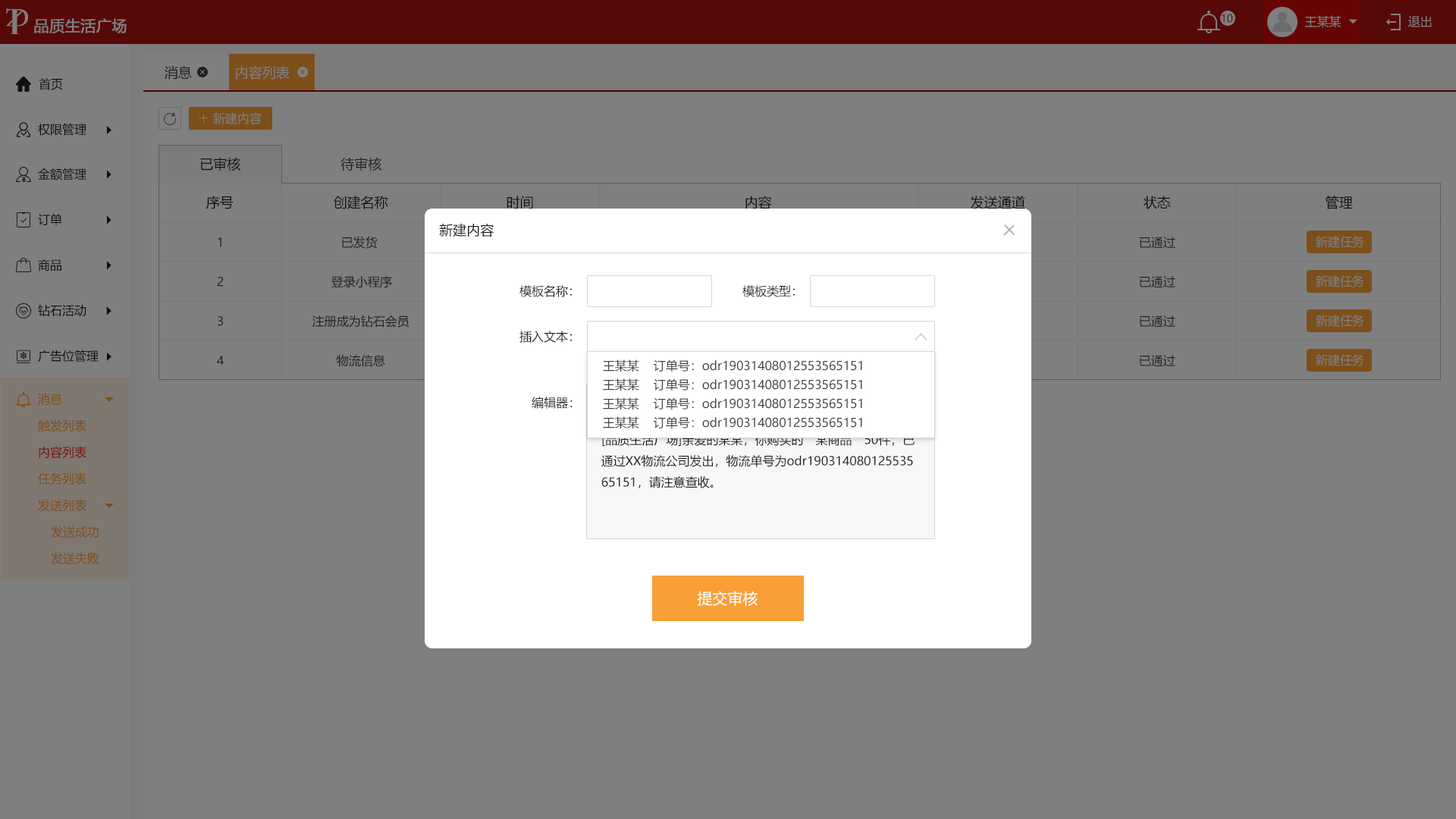
<style>
.page{position:relative;width:1456px;height:819px;background:#7f7f7f}
.page>*{position:absolute;margin:0}
.t1{font:10.6px "MicrosoftYaHei";color:#4e0303;text-transform:uppercase}
.t2{font:12.1px "MicrosoftYaHei";color:#7f7f7f;text-transform:uppercase}
.t3{font:15.2px "MicrosoftYaHei";color:#7f7f7f;text-transform:uppercase;font-weight:bold}
.t4{font:13.6px "MicrosoftYaHei";color:#202020;text-transform:uppercase}
.t5{font:13.6px "MicrosoftYaHei";color:#7f7f7f;text-transform:uppercase}
.t6{font:12.1px "MicrosoftYaHei";color:#202020;text-transform:uppercase}
.t7{font:12.1px "MicrosoftYaHei";color:#404040}
.t8{font:12.1px "MicrosoftYaHei";color:#7c4f1b;text-transform:uppercase}
.t9{font:12.1px "MicrosoftYaHei";color:#202020}
.t10{font:12.1px "MicrosoftYaHei";color:#730f0c;text-transform:uppercase}
.t11{font:15.2px "MicrosoftYaHei";color:#ffffff}
</style>
<div class="page">
<p class="t1" style="left:1222px;top:14px;width:11px;height:9px">10</p>
<p class="t2" style="left:1305px;top:15px;width:36px;height:13px">王某某</p>
<p class="t2" style="left:1408px;top:16px;width:24px;height:11px">退出</p>
<p class="t3" style="left:34px;top:18px;width:93px;height:15px">品质生活广场</p>
<p class="t4" style="left:165px;top:66px;width:27px;height:14px">消息</p>
<p class="t5" style="left:236px;top:66px;width:54px;height:14px">内容列表</p>
<p class="t6" style="left:39px;top:78px;width:24px;height:12px">首页</p>
<p class="t2" style="left:213px;top:112px;width:49px;height:12px">新建内容</p>
<p class="t6" style="left:38px;top:123px;width:48px;height:13px">权限管理</p>
<p class="t4" style="left:200px;top:157px;width:41px;height:14px">已审核</p>
<p class="t4" style="left:340px;top:157px;width:42px;height:14px">待审核</p>
<p class="t6" style="left:38px;top:168px;width:48px;height:12px">金额管理</p>
<p class="t4" style="left:206px;top:196px;width:28px;height:13px">序号</p>
<p class="t4" style="left:334px;top:196px;width:54px;height:13px">创建名称</p>
<p class="t4" style="left:507px;top:196px;width:26px;height:13px">时间</p>
<p class="t4" style="left:745px;top:196px;width:27px;height:13px">内容</p>
<p class="t4" style="left:971px;top:196px;width:54px;height:13px">发送通道</p>
<p class="t4" style="left:1143px;top:196px;width:28px;height:13px">状态</p>
<p class="t4" style="left:1326px;top:196px;width:27px;height:13px">管理</p>
<p class="t6" style="left:38px;top:213px;width:24px;height:13px">订单</p>
<p class="t4" style="left:439px;top:223px;width:55px;height:14px">新建内容</p>
<p class="t6" style="left:218px;top:237px;width:3px;height:10px">1</p>
<p class="t6" style="left:342px;top:236px;width:36px;height:13px">已发货</p>
<p class="t6" style="left:1140px;top:237px;width:35px;height:12px">已通过</p>
<p class="t2" style="left:1316px;top:236px;width:48px;height:12px">新建任务</p>
<p class="t6" style="left:38px;top:259px;width:23px;height:12px">商品</p>
<p class="t6" style="left:217px;top:277px;width:7px;height:10px">2</p>
<p class="t6" style="left:331px;top:275px;width:61px;height:13px">登录小程序</p>
<p class="t6" style="left:1140px;top:276px;width:35px;height:12px">已通过</p>
<p class="t2" style="left:1316px;top:275px;width:48px;height:12px">新建任务</p>
<p class="t6" style="left:519px;top:285px;width:53px;height:12px">模板名称：</p>
<p class="t6" style="left:742px;top:285px;width:53px;height:12px">模板类型：</p>
<p class="t6" style="left:38px;top:304px;width:48px;height:12px">钻石活动</p>
<p class="t6" style="left:218px;top:316px;width:5px;height:10px">3</p>
<p class="t6" style="left:312px;top:315px;width:97px;height:13px">注册成为钻石会员</p>
<p class="t6" style="left:1140px;top:315px;width:35px;height:13px">已通过</p>
<p class="t2" style="left:1316px;top:315px;width:48px;height:12px">新建任务</p>
<p class="t6" style="left:519px;top:331px;width:53px;height:12px">插入文本：</p>
<p class="t6" style="left:38px;top:350px;width:61px;height:12px">广告位管理</p>
<p class="t6" style="left:217px;top:356px;width:7px;height:10px">4</p>
<p class="t6" style="left:336px;top:354px;width:49px;height:13px">物流信息</p>
<p class="t7" style="left:603px;top:359px;width:259px;height:13px">王某某    订单号：odr19031408012553565151</p>
<p class="t6" style="left:1140px;top:355px;width:35px;height:12px">已通过</p>
<p class="t2" style="left:1316px;top:354px;width:48px;height:12px">新建任务</p>
<p class="t7" style="left:603px;top:378px;width:259px;height:13px">王某某    订单号：odr19031408012553565151</p>
<p class="t8" style="left:38px;top:393px;width:24px;height:12px">消息</p>
<p class="t9" style="left:532px;top:397px;width:41px;height:12px">编辑器：</p>
<p class="t7" style="left:603px;top:397px;width:259px;height:13px">王某某    订单号：odr19031408012553565151</p>
<p class="t8" style="left:38px;top:419px;width:48px;height:12px">触发列表</p>
<p class="t7" style="left:603px;top:416px;width:259px;height:13px">王某某    订单号：odr19031408012553565151</p>
<p class="t6" style="left:601px;top:434px;width:314px;height:54px">[品质生活广场]亲爱的某某，你购买的“某商品”50件，已<br>通过xx物流公司发出，物流单号为<span class="t9">odr190314080125535<br>65151，请注意查收。</span></p>
<p class="t10" style="left:39px;top:446px;width:47px;height:13px">内容列表</p>
<p class="t8" style="left:38px;top:472px;width:48px;height:13px">任务列表</p>
<p class="t8" style="left:38px;top:499px;width:48px;height:12px">发送列表</p>
<p class="t8" style="left:51px;top:526px;width:48px;height:12px">发送成功</p>
<p class="t8" style="left:51px;top:552px;width:48px;height:13px">发送失败</p>
<p class="t11" style="left:697px;top:591px;width:61px;height:15px">提交审核</p>
</div>
